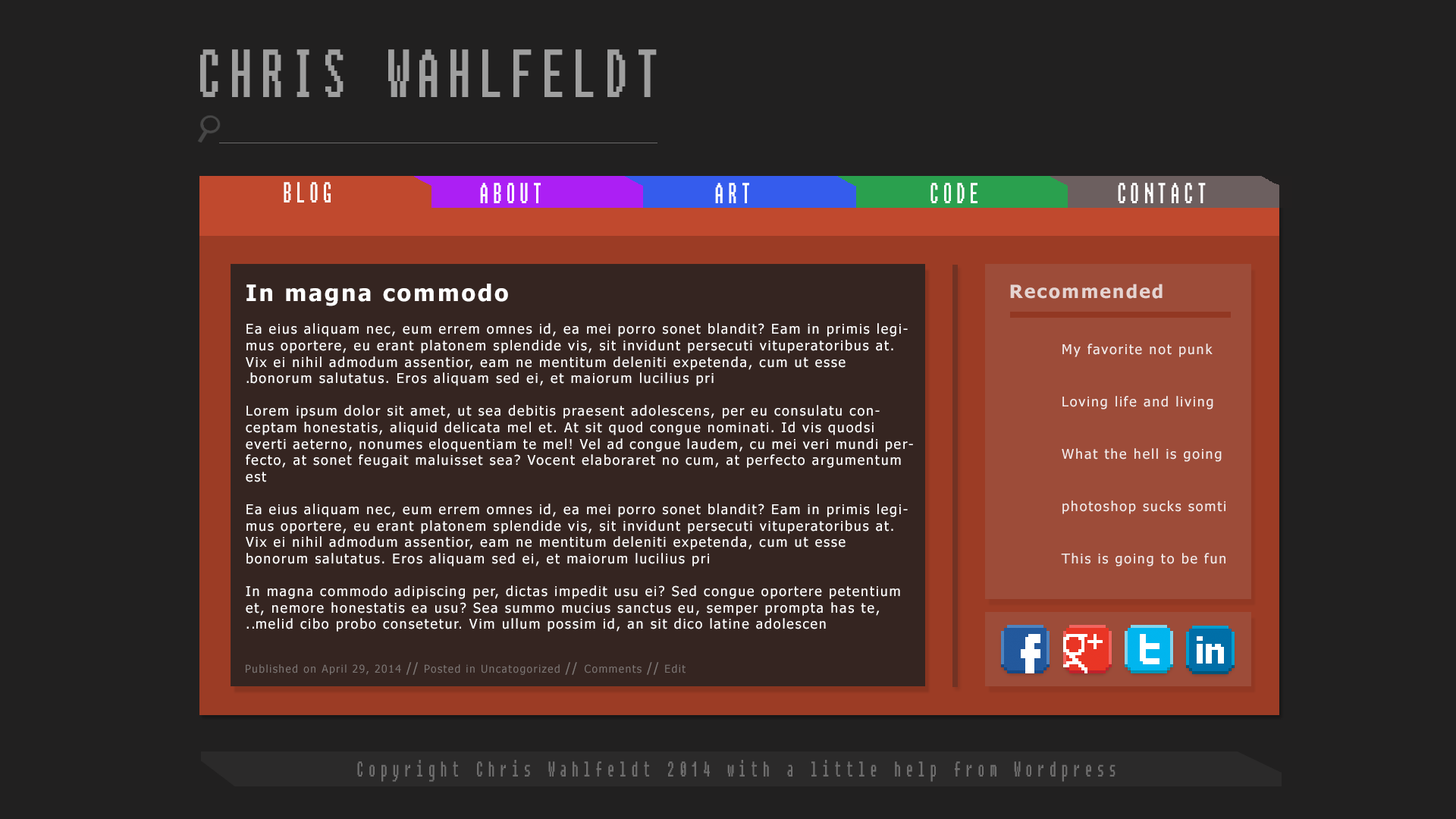
<style>
.page{position:relative;width:1456px;height:819px;background:#212020}
.page>*{position:absolute;margin:0}
.t1{font:67.7px "Fixedsys";letter-spacing:0.2em;color:#9f9f9f;scale:0.56 1}
.t2{font:28.8px "Fixedsys";letter-spacing:0.3em;color:#ffffff;scale:0.5 1}
.t3{font:13.6px "Tahoma";letter-spacing:0.1em;color:#ffffff}
.t4{font:22.7px "Tahoma-Bold";letter-spacing:0.1em;color:#ffffff}
.t5{font:18.2px "Tahoma-Bold";letter-spacing:0.1em;color:#e5d4d1}
.t6{font:13.6px/17.4px "Tahoma";letter-spacing:0.1em;color:#ffffff}
.t7{font:10.6px "Tahoma";letter-spacing:0.1em;color:#7c7674}
.t8{font:13.6px "Tahoma";letter-spacing:0.1em;color:#7c7674}
.t9{font:21.2px "Fixedsys";letter-spacing:0.5em;color:#6f6e6e;scale:0.5 1}
</style>
<div class="page">
<p class="t1" style="left:200px;top:49px;width:457px;height:48px">CHRIS WAHLFELDT</p>
<p class="t2" style="left:284px;top:182px;width:47px;height:20px">BLOG</p>
<p class="t2" style="left:480px;top:183px;width:61px;height:20px">ABOUT</p>
<p class="t2" style="left:715px;top:183px;width:34px;height:20px">ART</p>
<p class="t2" style="left:930px;top:183px;width:47px;height:20px">CODE</p>
<p class="t2" style="left:1118px;top:183px;width:88px;height:20px">CONTACT</p>
<p class="t3" style="left:246px;top:284px;width:667px;height:348px;text-align:right"><span class="t4">In magna commodo</span><br><br>Ea eius aliquam nec, eum errem omnes id, ea mei porro sonet blandit? Eam in primis legimus oportere, eu erant platonem splendide vis, sit invidunt persecuti vituperatoribus at. Vix ei nihil admodum assentior, eam ne mentitum deleniti expetenda, cum ut esse bonorum salutatus. Eros aliquam sed ei, et maiorum lucilius pri.<br><br>Lorem ipsum dolor sit amet, ut sea debitis praesent adolescens, per eu consulatu conceptam honestatis, aliquid delicata mel et. At sit quod congue nominati. Id vis quodsi everti aeterno, nonumes eloquentiam te mel! Vel ad congue laudem, cu mei veri mundi perfecto, at sonet feugait maluisset sea? Vocent elaboraret no cum, at perfecto argumentum est<br><br>Ea eius aliquam nec, eum errem omnes id, ea mei porro sonet blandit? Eam in primis legimus oportere, eu erant platonem splendide vis, sit invidunt persecuti vituperatoribus at. Vix ei nihil admodum assentior, eam ne mentitum deleniti expetenda, cum ut esse bonorum salutatus. Eros aliquam sed ei, et maiorum lucilius pri<br><br>In magna commodo adipiscing per, dictas impedit usu ei? Sed congue oportere petentium et, nemore honestatis ea usu? Sea summo mucius sanctus eu, semper prompta has te, melid cibo probo consetetur. Vim ullum possim id, an sit dico latine adolescen..</p>
<p class="t5" style="left:1010px;top:284px;width:153px;height:15px">Recommended</p>
<p class="t6" style="left:1061px;top:344px;width:164px;height:222px;text-align:right;opacity:0.86">My favorite not punk<br><br><br>Loving life and living <br><br><br>What the hell is going<br><br><br>photoshop sucks somti<br><br><br>This is going to be fun</p>
<p class="t7" style="left:246px;top:662px;width:440px;height:13px">Published on April 29, 2014 <span class="t8">//</span> Posted in Uncatogorized <span class="t8">// </span>Comments <span class="t8">//</span> Edit</p>
<p class="t9" style="left:357px;top:760px;width:758px;height:22px">Copyright Chris Wahlfeldt 2014 with a little help from Wordpress</p>
</div>
